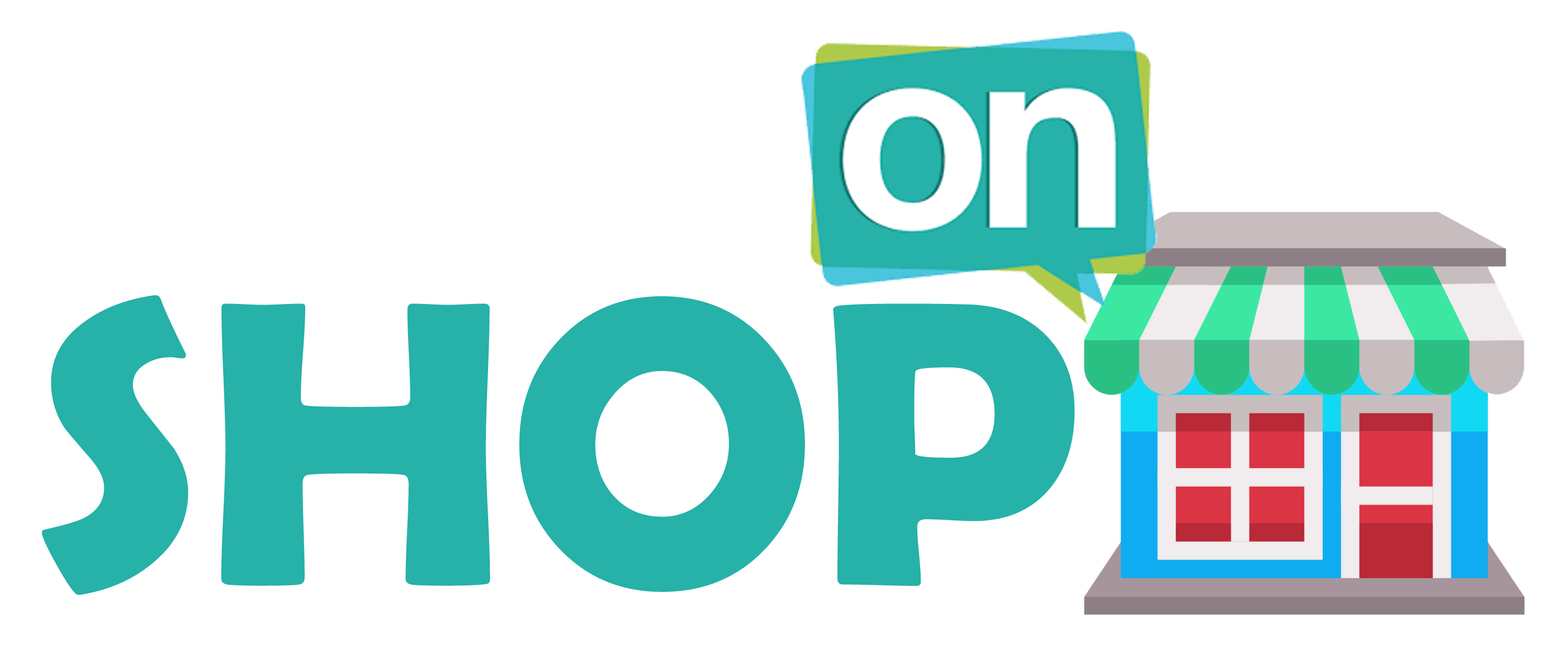
<style>
.page{position:relative;width:1568px;height:647px;background:#ffffff}
.page>*{position:absolute;margin:0}
.t1{font:410px "BerlinSansFBDemi-Bold";color:#26b1a9}
</style>
<div class="page">
<p class="t1" style="left:42px;top:295px;width:1033px;height:301px">SHOP</p>
</div>
